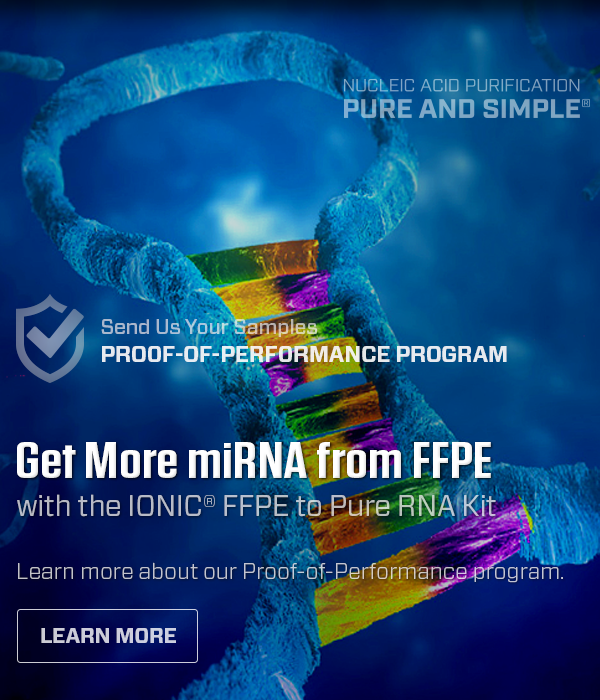
<style>
.page{position:relative;width:600px;height:700px}
.page>*{position:absolute;margin:0}
.t1{font:20.8px "Forza-Medium";letter-spacing:-0.01em}
.t2{font:22.1px "Forza-Bold";letter-spacing:-0.01em;color:#e6eaef;text-transform:uppercase}
.t3{font:50.8px "Tungsten-Semibold";color:#ffffff;scale:1.31 1}
.t4{font:29.2px "Forza-Book";letter-spacing:-0.007em;color:#b8bdc6}
.t5{font:29.2px "Forza-Book";letter-spacing:-0.007em;color:#b8bdc6;text-transform:uppercase}
.t6{font:22px "Forza-Light";color:#c2c5d0}
.t7{font:20.8px "Forza-Bold";letter-spacing:-0.01em;color:#ccccda;text-transform:uppercase}
</style>
<div class="page">
<p class="t1" style="left:101px;top:319px;width:216px;height:18px">Send Us Your Samples</p>
<p class="t2" style="left:102px;top:346px;width:405px;height:16px">Proof-of-Performance Program</p>
<p class="t3" style="left:17px;top:442px;width:474px;height:36px">Get More miRNA from FFPE</p>
<p class="t4" style="left:17px;top:494px;width:479px;height:23px">with the <span class="t5">Ionic®</span> FFPE to Pure RNA Kit</p>
<p class="t6" style="left:18px;top:562px;width:545px;height:21px">Learn more about our Proof-of-Performance program.</p>
<p class="t7" style="left:41px;top:628px;width:135px;height:15px">Learn More</p>
</div>
